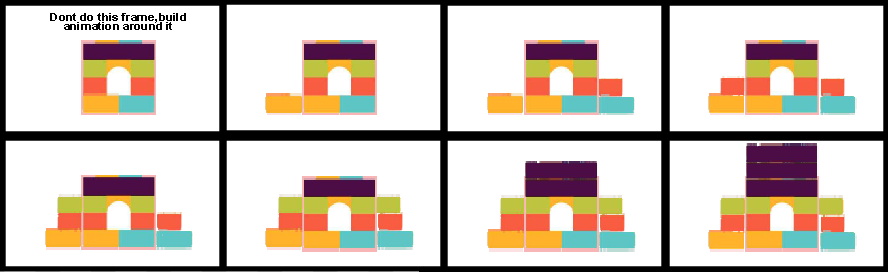
<style>
.page{position:relative;width:888px;height:272px;background:#ffffff}
.page>*{position:absolute;margin:0}
.t1{font:11.1px "Arial-BoldMT";color:#000000;scale:1.06 1}
</style>
<div class="page">
<p class="t1" style="left:50px;top:13px;width:136px;height:17px">Dont do this frame,build animation around it</p>
</div>
